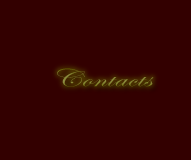
<style>
.page{position:relative;width:191px;height:160px;background:#330000}
.page>*{position:absolute;margin:0}
.t1{font:25.2px "EdwardianScriptITC";letter-spacing:0.025em;color:#878736;scale:1.43 1}
</style>
<div class="page">
<p class="t1" style="left:57px;top:68px;width:97px;height:19px">Contacts</p>
</div>
